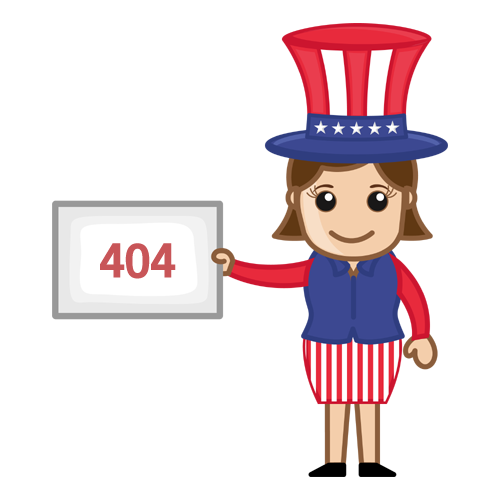
<style>
.page{position:relative;width:500px;height:500px;background:#ffffff}
.page>*{position:absolute;margin:0}
.t1{font:48px "Coolvetica";color:#c85558}
</style>
<div class="page">
<p class="t1" style="left:100px;top:243px;width:76px;height:36px">404</p>
</div>
